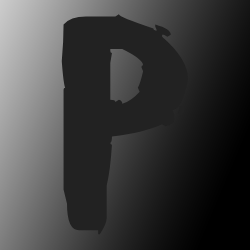
<style>
.page{position:relative;width:250px;height:250px;background:#222222}
.page>*{position:absolute;margin:0}
.t1{font:306.8px "DeadFontWalking";color:#222222}
</style>
<div class="page">
<p class="t1" style="left:61px;top:14px;width:127px;height:221px">P</p>
</div>
